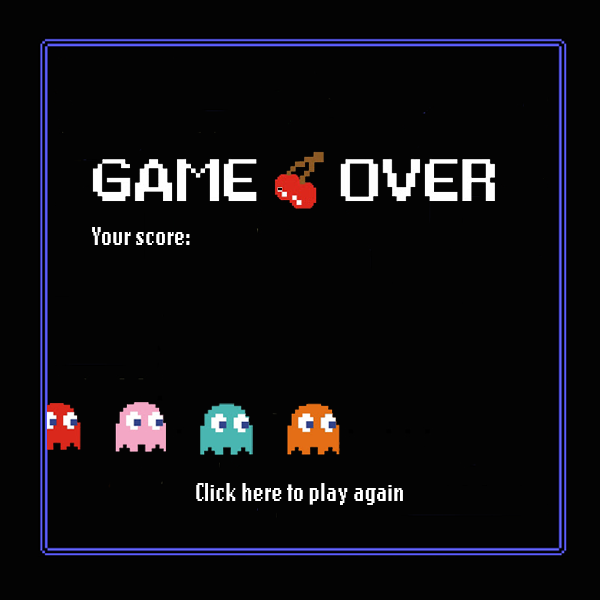
<style>
.page{position:relative;width:600px;height:600px;background:#030303}
.page>*{position:absolute;margin:0}
.t1{font:26.6px "LoRes15OT-Bold";letter-spacing:0.01em;color:#ffffff;scale:0.79 1}
</style>
<div class="page">
<p class="t1" style="left:92px;top:227px;width:98px;height:18px">Your score:</p>
<p class="t1" style="left:196px;top:483px;width:207px;height:22px">Click here to play again</p>
</div>
